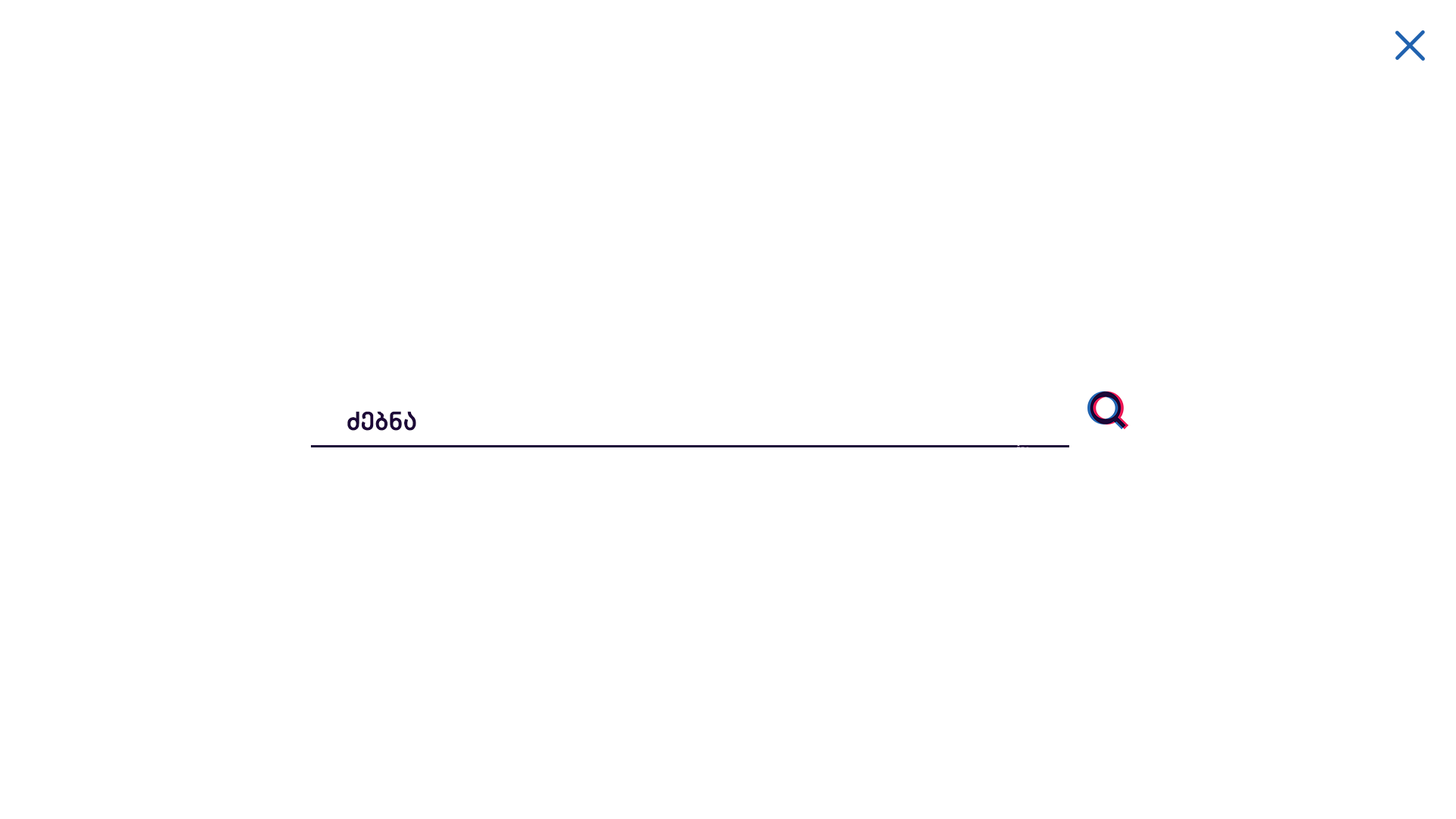
<style>
.page{position:relative;width:1456px;height:819px;background:#ffffff}
.page>*{position:absolute;margin:0}
.t1{font:24.3px "BPGWEB001Caps";color:#1d0838;text-transform:uppercase}
</style>
<div class="page">
<p class="t1" style="left:347px;top:411px;width:69px;height:20px">ძებნა</p>
</div>
